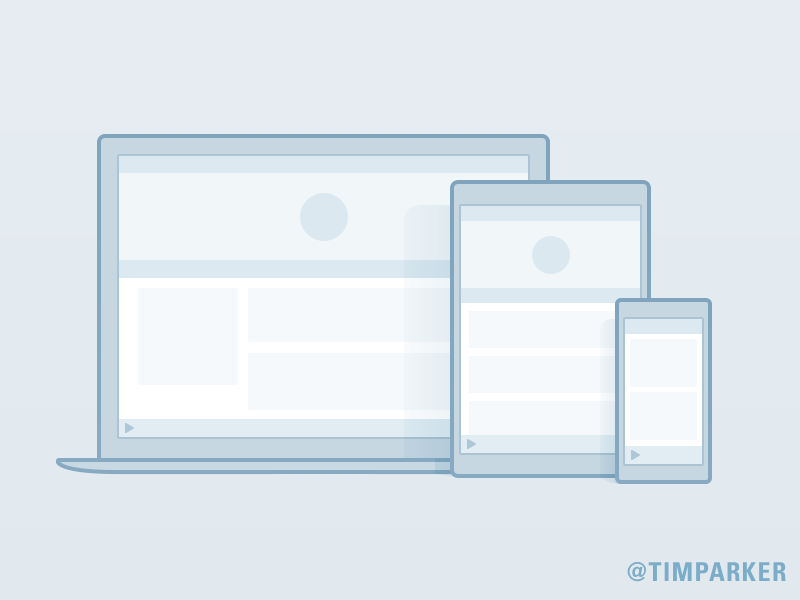
<style>
.page{position:relative;width:800px;height:600px;background:#e6ecf2}
.page>*{position:absolute;margin:0}
.t1{font:26px "UniversLTStd-BoldCn";letter-spacing:0.05em;color:#80a4bd;text-transform:uppercase}
</style>
<div class="page">
<p class="t1" style="left:627px;top:561px;width:159px;height:21px">@timparker</p>
</div>
